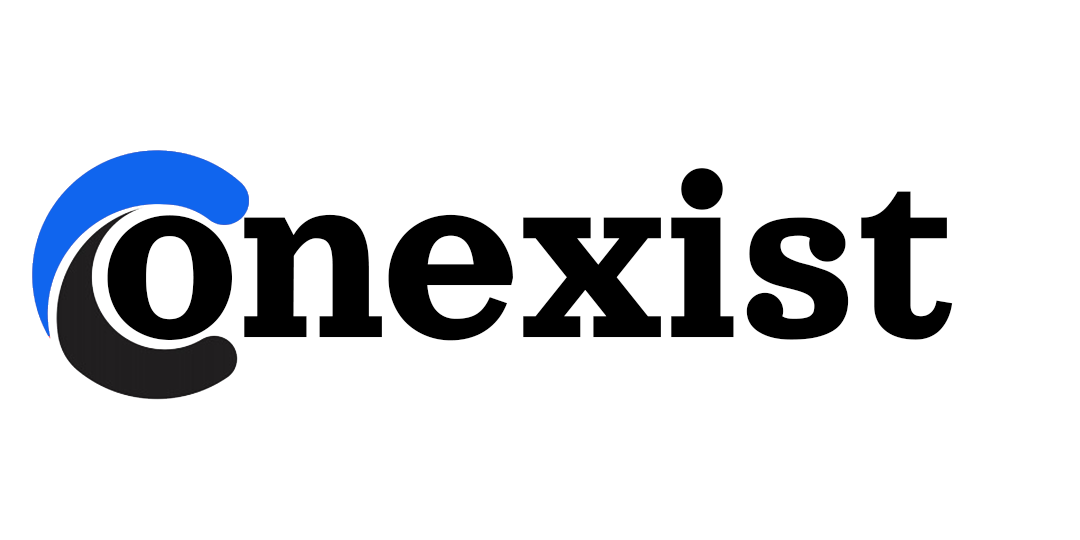
<style>
.page{position:relative;width:1080px;height:540px;background:#ffffff}
.page>*{position:absolute;margin:0}
.t1{font:266.5px "OrelegaOne-Regular";color:#000000}
</style>
<div class="page">
<p class="t1" style="left:107px;top:168px;width:846px;height:173px">onexist</p>
</div>
